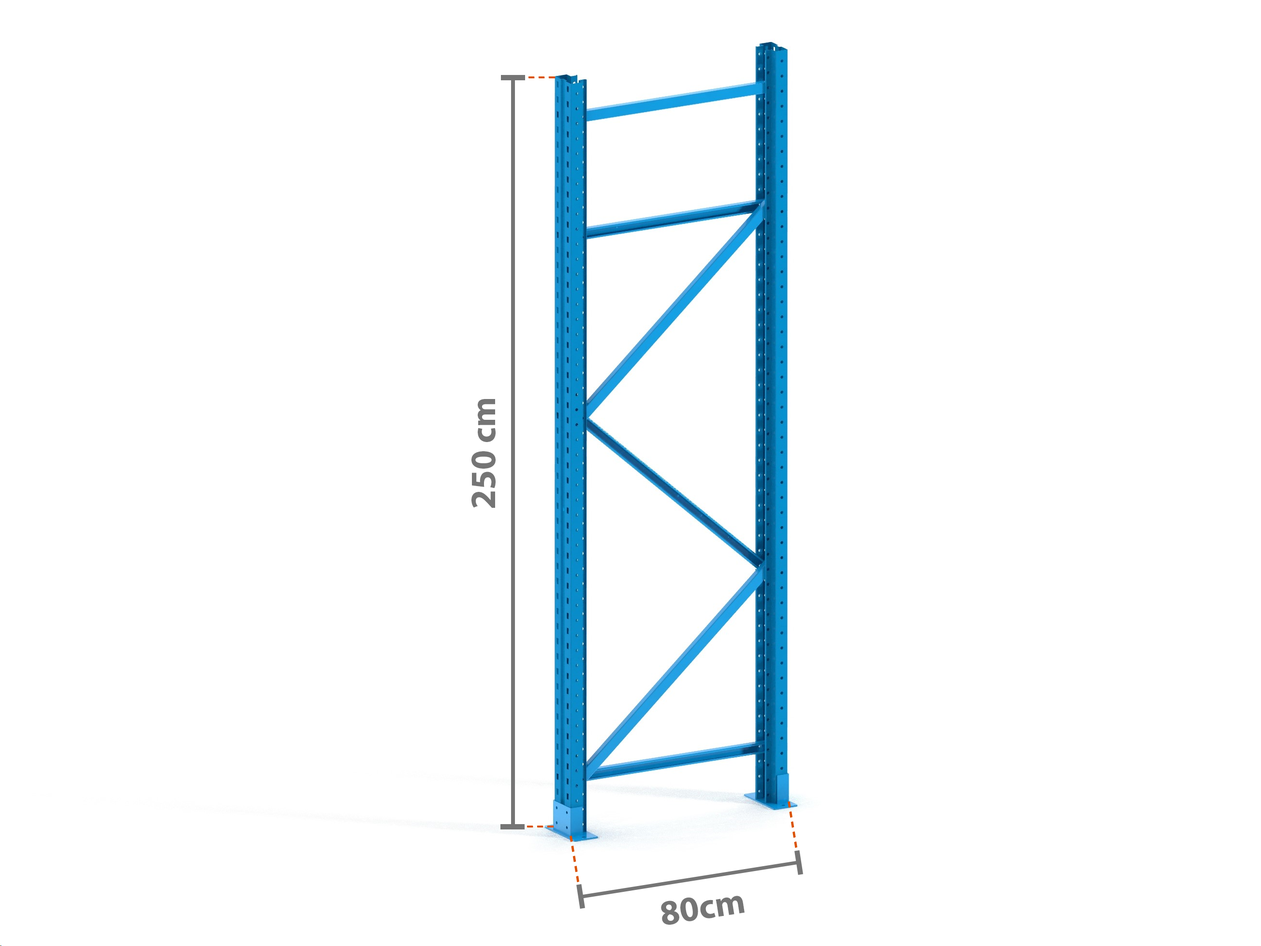
<style>
.page{position:relative;width:1261px;height:946px;background:#ffffff}
.page>*{position:absolute;margin:0}
.t1{font:35.5px "MyriadPro-Bold";color:#757575}
</style>
<div class="page">
<p class="t1" style="left:471px;top:399px;width:25px;height:109px;rotate:-90deg">250 cm</p>
<p class="t1" style="left:661px;top:895px;width:84px;height:29px;rotate:-9deg">80cm</p>
</div>
